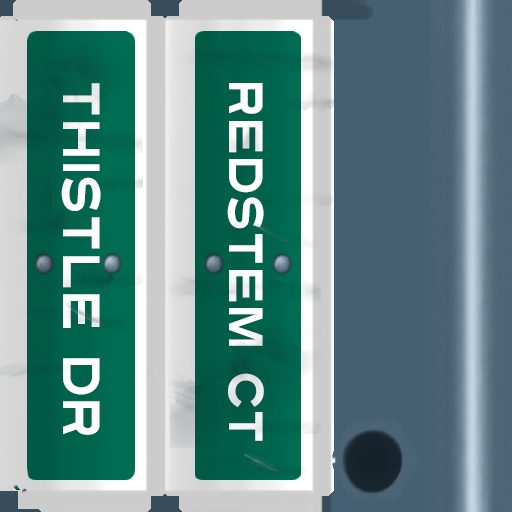
<style>
.page{position:relative;width:512px;height:512px}
.page>*{position:absolute;margin:0}
.t1{font:52px "Turnpike";color:#fefeff;scale:0.75 1}
.t2{font:48px "Turnpike";color:#fefeff;scale:0.75 1}
</style>
<div class="page">
<p class="t1" style="left:61px;top:83px;width:40px;height:352px;rotate:90deg">Thistle Dr</p>
<p class="t2" style="left:227px;top:83px;width:37px;height:358px;rotate:90deg">Redstem Ct</p>
</div>
